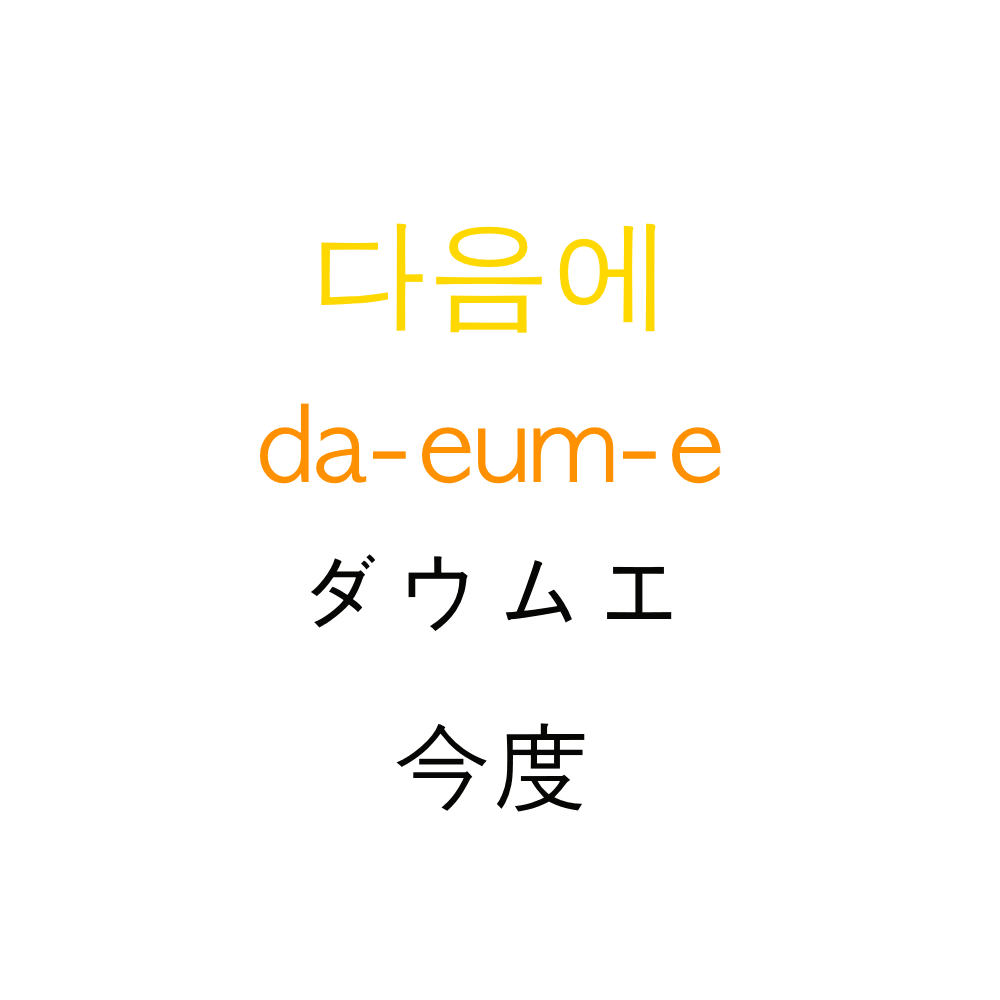
<style>
.page{position:relative;width:1000px;height:1000px;background:#ffffff}
.page>*{position:absolute;margin:0}
.t1{font:120px "AppleGothic";color:#ffd800}
.t2{font:100px "AppleGothic";color:#ff9000}
.t3{font:100px "AppleGothic";color:#060605}
</style>
<div class="page">
<p class="t1" style="left:321px;top:223px;width:335px;height:110px">다음에</p>
<p class="t2" style="left:260px;top:403px;width:461px;height:81px">da-eum-e</p>
<p class="t3" style="left:311px;top:554px;width:361px;height:77px">ダウムエ</p>
<p class="t3" style="left:396px;top:723px;width:189px;height:89px">今度</p>
</div>
